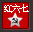
<style>
.page{position:relative;width:33px;height:32px;background:#c50000}
.page>*{position:absolute;margin:0}
.t1{font:10.4px "SimSun";letter-spacing:-0.25em;color:#ffffff}
</style>
<div class="page">
<p class="t1" style="left:4px;top:4px;width:25px;height:9px">红六七</p>
</div>
